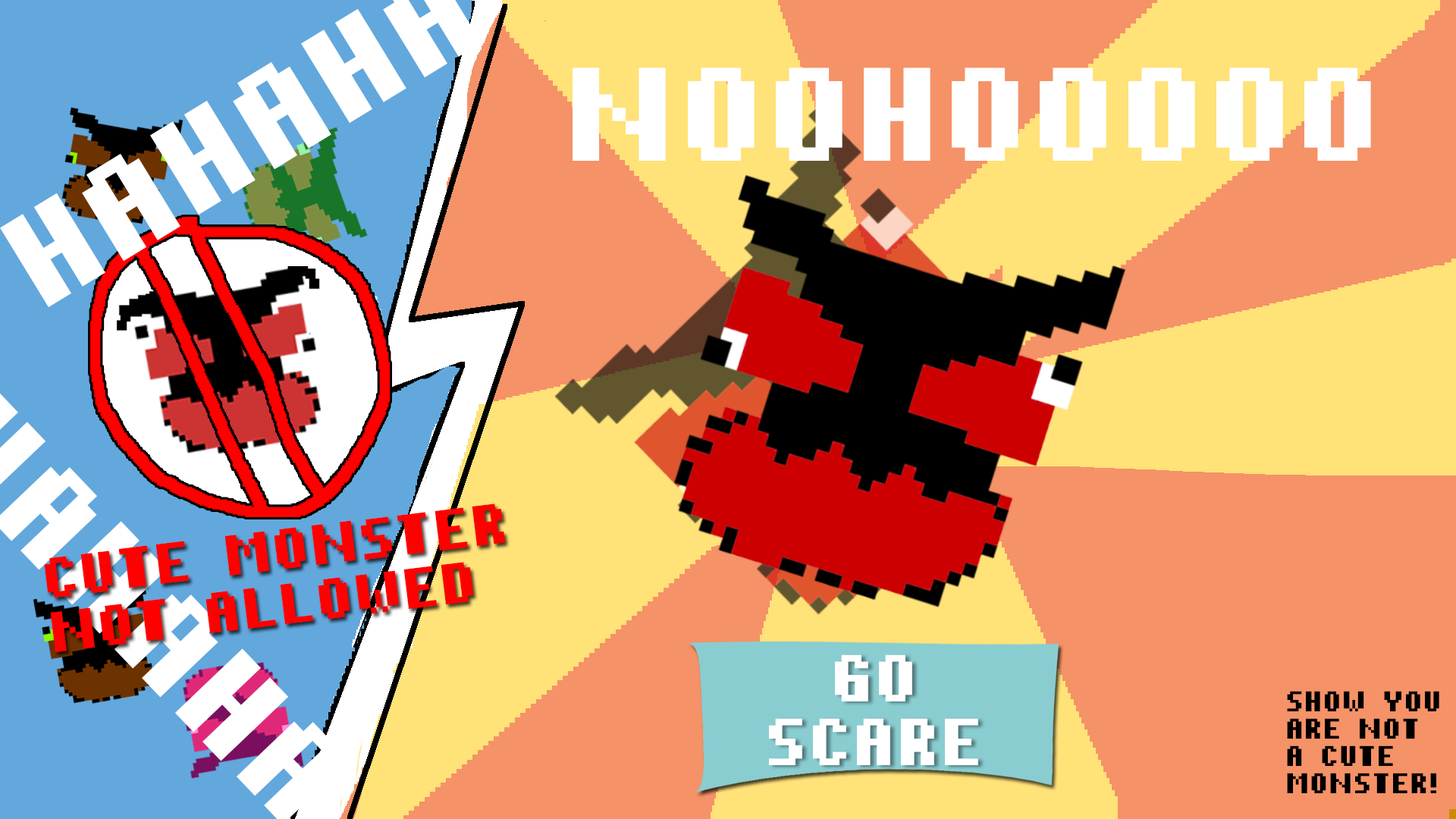
<style>
.page{position:relative;width:1456px;height:819px;background:#f59267}
.page>*{position:absolute;margin:0}
.t1{font:106.2px "pixelmix-bold";letter-spacing:0.08em;color:#ffffff;text-transform:uppercase}
.t2{font:45.5px "pixelmix-bold";letter-spacing:0.08em;color:#ff0000;text-transform:uppercase}
.t3{font:53.1px "pixelmix-bold";letter-spacing:0.08em;color:#ffffff;text-transform:uppercase}
.t4{font:22.7px "pixelmix-bold";letter-spacing:0.08em;color:#000000;text-transform:uppercase}
</style>
<div class="page">
<p class="t1" style="left:573px;top:67px;width:798px;height:94px">NOOhOOOOO</p>
<p class="t2" style="left:44px;top:504px;width:462px;height:148px;rotate:-7deg">cute monster<br>not allowed</p>
<p class="t3" style="left:769px;top:654px;width:209px;height:111px;text-align:center">GO<br>SCARE</p>
<p class="t4" style="left:1287px;top:691px;width:152px;height:102px">show you<br>are not <br>a cute <br>monster!</p>
</div>
